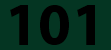
<style>
.page{position:relative;width:111px;height:50px;background:#043522}
.page>*{position:absolute;margin:0}
.t1{font:60px "MyriadPro-Bold";color:#000000}
</style>
<div class="page">
<p class="t1" style="left:10px;top:5px;width:85px;height:40px">101</p>
</div>
